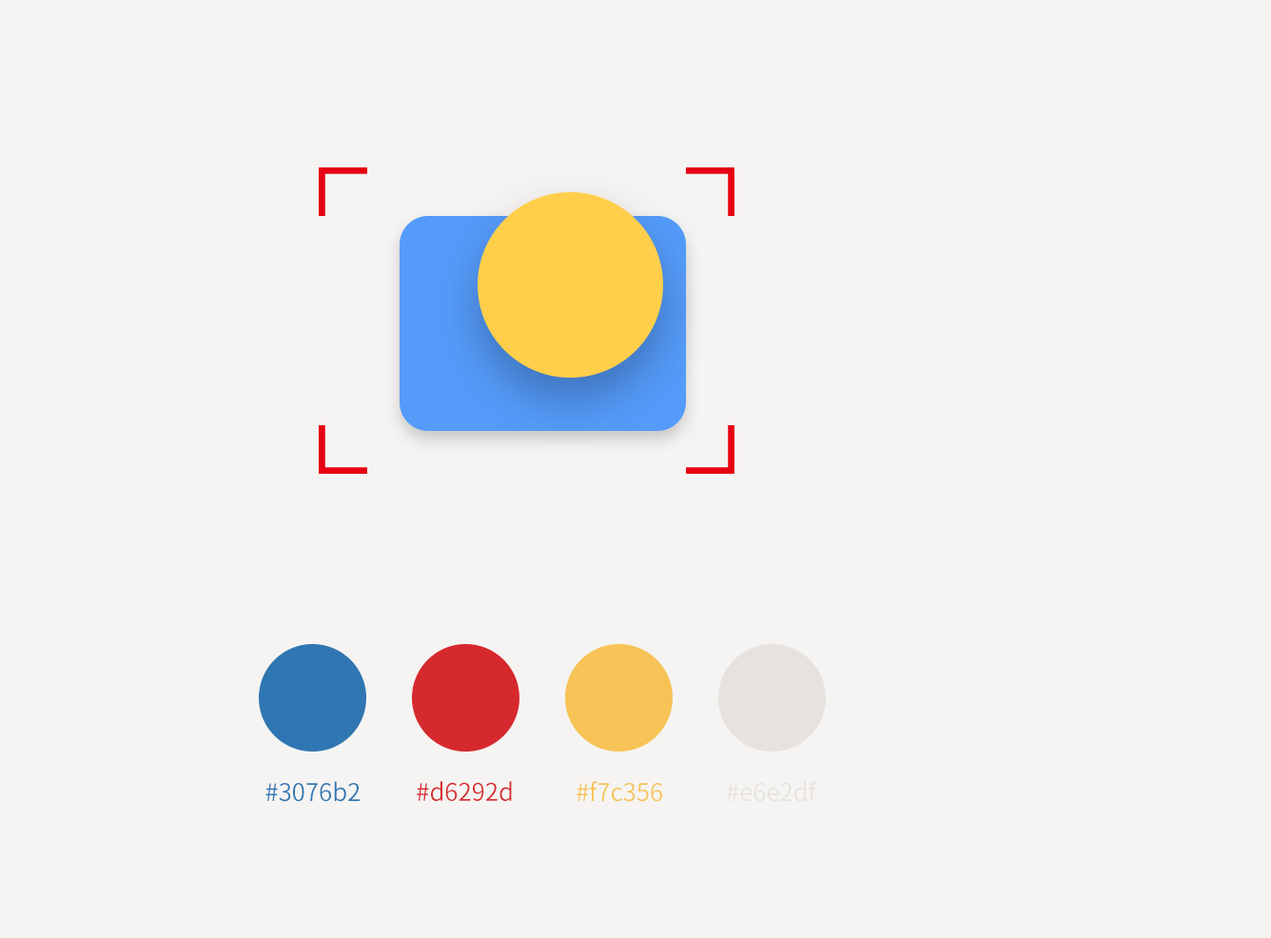
<style>
.page{position:relative;width:1271px;height:938px;background:#f5f4f2}
.page>*{position:absolute;margin:0}
.t1{font:24.5px "SourceHanSansCN-Normal";color:#3076b2}
.t2{font:24.5px "SourceHanSansCN-Normal";color:#d6292d}
.t3{font:24.5px "SourceHanSansCN-Normal";color:#f7c356}
.t4{font:24.5px "SourceHanSansCN-Normal";color:#e6e2df}
</style>
<div class="page">
<p class="t1" style="left:265px;top:781px;width:95px;height:21px">#3076b2</p>
<p class="t2" style="left:417px;top:781px;width:95px;height:20px">#d6292d</p>
<p class="t3" style="left:577px;top:781px;width:85px;height:21px">#f7c356</p>
<p class="t4" style="left:727px;top:781px;width:90px;height:21px">#e6e2df</p>
</div>
